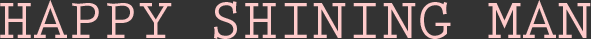
<style>
.page{position:relative;width:591px;height:39px;background:#333333}
.page>*{position:absolute;margin:0}
.t1{font:58.3px "PrestigeEliteStd-Bd";color:#fecaca}
</style>
<div class="page">
<p class="t1" style="left:0px;top:0px;width:591px;height:39px">HAPPY SHINING MAN</p>
</div>
